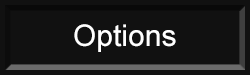
<style>
.page{position:relative;width:250px;height:75px;background:#111111}
.page>*{position:absolute;margin:0}
.t1{font:30px "ArialMT";color:#ffffff}
</style>
<div class="page">
<p class="t1" style="left:74px;top:24px;width:102px;height:28px">Options</p>
</div>
